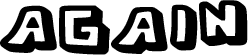
<style>
.page{position:relative;width:248px;height:55px;background:#ffffff}
.page>*{position:absolute;margin:0}
.t1{font:66.7px "Whypo";color:#000000;font-weight:bold;scale:1.08 1}
</style>
<div class="page">
<p class="t1" style="left:0px;top:0px;width:248px;height:55px">Again</p>
</div>
